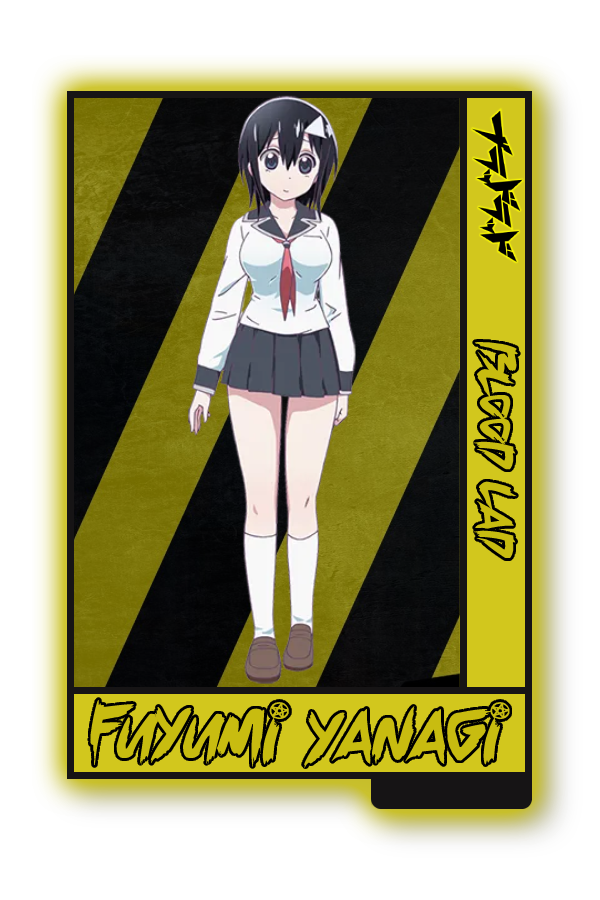
<style>
.page{position:relative;width:600px;height:900px;background:#ffffff}
.page>*{position:absolute;margin:0}
.t1{font:48.8px "ChillingSabrina";color:#c8bc10}
.t2{font:69.4px "ChillingSabrina";color:#c8bc10}
</style>
<div class="page">
<p class="t1" style="left:473px;top:341px;width:45px;height:218px;rotate:90deg">Blood Lad</p>
<p class="t2" style="left:90px;top:700px;width:420px;height:68px">Fuyumi Yanagi</p>
</div>
